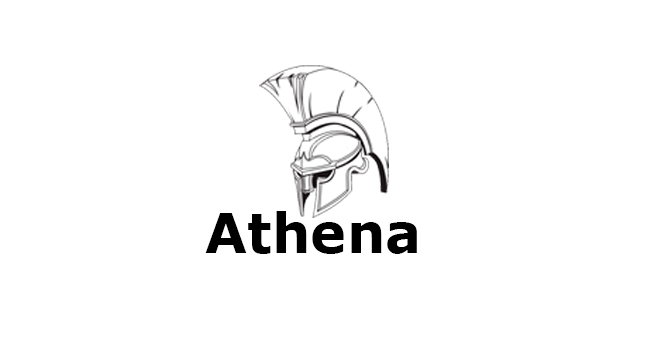
<style>
.page{position:relative;width:650px;height:350px;background:#ffffff}
.page>*{position:absolute;margin:0}
.t1{font:54.6px "Verdana-Bold";color:#000001}
</style>
<div class="page">
<p class="t1" style="left:205px;top:211px;width:212px;height:43px">Athena</p>
</div>
